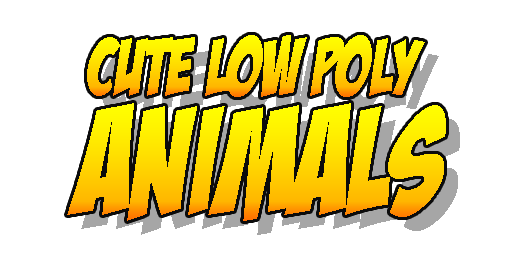
<style>
.page{position:relative;width:512px;height:256px;background:#ffffff}
.page>*{position:absolute;margin:0}
.t1{font:80px "BadaBoomBB";scale:0.85 1}
.t2{font:150px "BadaBoomBB";scale:0.85 1}
</style>
<div class="page">
<p class="t1" style="left:87px;top:35px;width:338px;height:62px">Cute Low Poly</p>
<p class="t2" style="left:67px;top:103px;width:379px;height:118px">ANIMALS</p>
</div>
